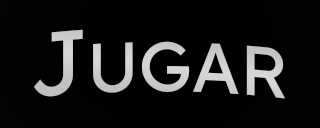
<style>
.page{position:relative;width:320px;height:128px;background:#010101}
.page>*{position:absolute;margin:0}
.t1{font:70px "Lexend-Regular";color:#cdcdcd}
.t2{font:90px "Lexend-Regular";color:#cdcdcd}
</style>
<div class="page">
<p class="t1" style="left:34px;top:29px;width:252px;height:70px"><span class="t2">J</span>UGAR</p>
</div>
